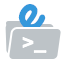
<style>
.page{position:relative;width:64px;height:64px;background:#ffffff}
.page>*{position:absolute;margin:0}
.t1{font:48px "Chalkboard-Bold";color:#3498db}
.t2{font:20px "Menlo-Bold";color:#ffffff}
</style>
<div class="page">
<p class="t1" style="left:18px;top:4px;width:28px;height:27px;rotate:-38deg">e</p>
<p class="t2" style="left:22px;top:37px;width:25px;height:16px">&gt;_</p>
</div>
